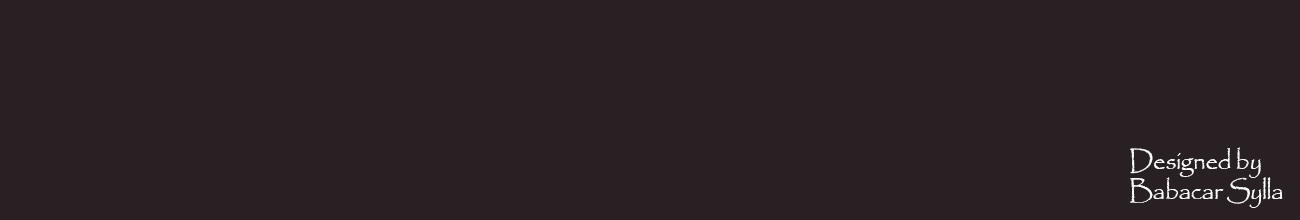
<style>
.page{position:relative;width:1300px;height:220px;background:#282022}
.page>*{position:absolute;margin:0}
.t1{font:26.3px "Papyrus-Regular";letter-spacing:-0.025em;color:#ffffff;scale:0.95 1}
</style>
<div class="page">
<p class="t1" style="left:1130px;top:147px;width:153px;height:61px">Designed by <br>Babacar Sylla</p>
</div>
